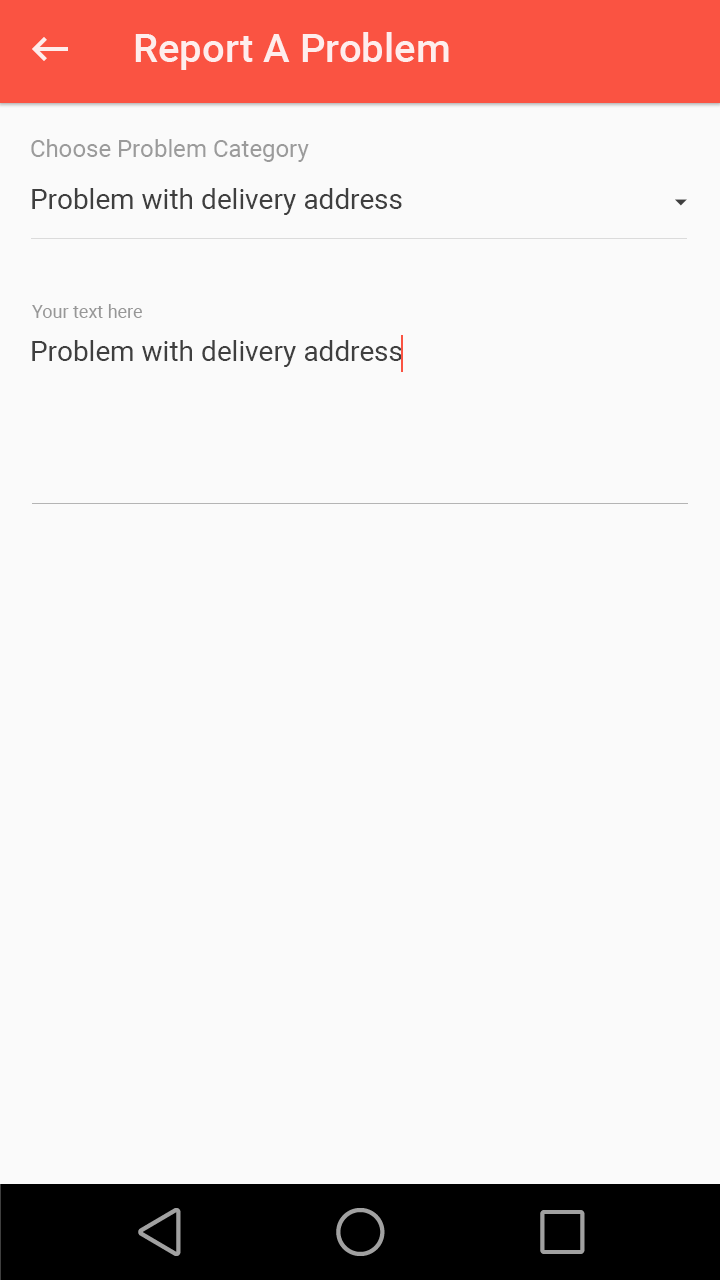
<style>
.page{position:relative;width:720px;height:1280px;background:#fafafa}
.page>*{position:absolute;margin:0}
.t1{font:40px "Roboto-Medium";color:#ffffff}
.t2{font:24px "Roboto-Regular";color:#9b9b9b}
.t3{font:28px "Roboto-Regular";color:#3f3f3f}
.t4{font:18px "Roboto-Regular";color:#979797}
</style>
<div class="page">
<p class="t1" style="left:135px;top:32px;width:314px;height:38px;opacity:0.87">Report A Problem</p>
<p class="t2" style="left:31px;top:139px;width:278px;height:23px">Choose Problem Category</p>
<p class="t3" style="left:32px;top:188px;width:370px;height:27px">Problem with delivery address</p>
<p class="t4" style="left:32px;top:304px;width:110px;height:14px">Your text here</p>
<p class="t3" style="left:32px;top:340px;width:370px;height:27px">Problem with delivery address</p>
</div>
